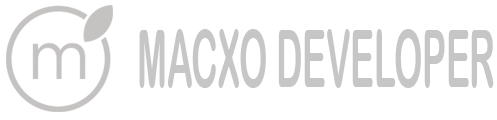
<style>
.page{position:relative;width:497px;height:120px;background:#ffffff}
.page>*{position:absolute;margin:0}
.t1{font:80.2px "ArialRoundedMTBold";color:#c6c6c6;scale:0.44 1}
</style>
<div class="page">
<p class="t1" style="left:139px;top:29px;width:355px;height:59px">MACXO DEVELOPER</p>
</div>
